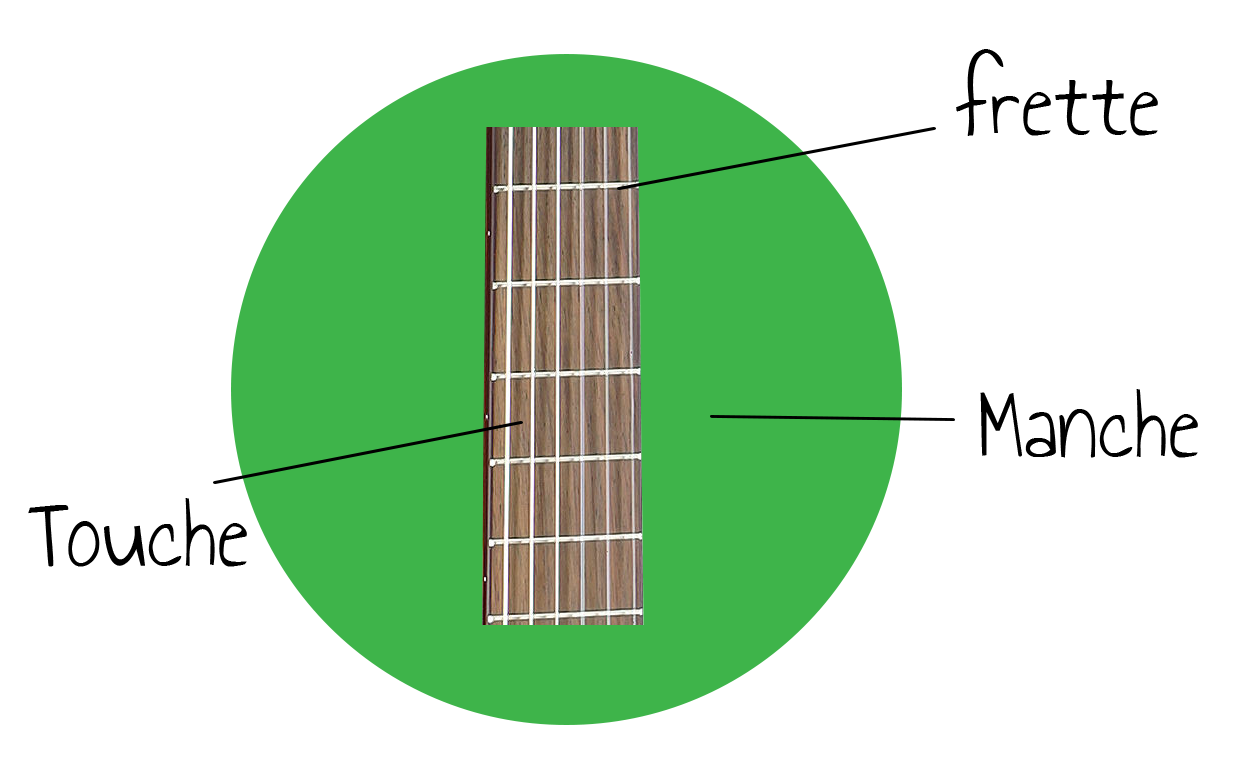
<style>
.page{position:relative;width:1235px;height:778px;background:#ffffff}
.page>*{position:absolute;margin:0}
.t1{font:75px "AnnieUseYourTelescope";color:#000000}
</style>
<div class="page">
<p class="t1" style="left:956px;top:49px;width:202px;height:87px">frette</p>
<p class="t1" style="left:980px;top:389px;width:218px;height:69px">Manche</p>
<p class="t1" style="left:28px;top:498px;width:219px;height:69px">Touche</p>
</div>
